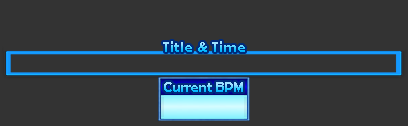
<style>
.page{position:relative;width:408px;height:126px;background:#333333}
.page>*{position:absolute;margin:0}
.t1{font:15px "BerlinSansFBDemi-Bold"}
.t2{font:14px "BerlinSansFBDemi-Bold"}
</style>
<div class="page">
<p class="t1" style="left:163px;top:41px;width:82px;height:11px">Title &amp; Time</p>
<p class="t2" style="left:164px;top:82px;width:79px;height:10px">Current BPM</p>
</div>
